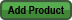
<style>
.page{position:relative;width:72px;height:20px;background:#408838}
.page>*{position:absolute;margin:0}
.t1{font:11px "Arial-BoldMT";color:#000000;scale:0.85 1}
</style>
<div class="page">
<p class="t1" style="left:7px;top:6px;width:57px;height:8px">Add Product</p>
</div>
